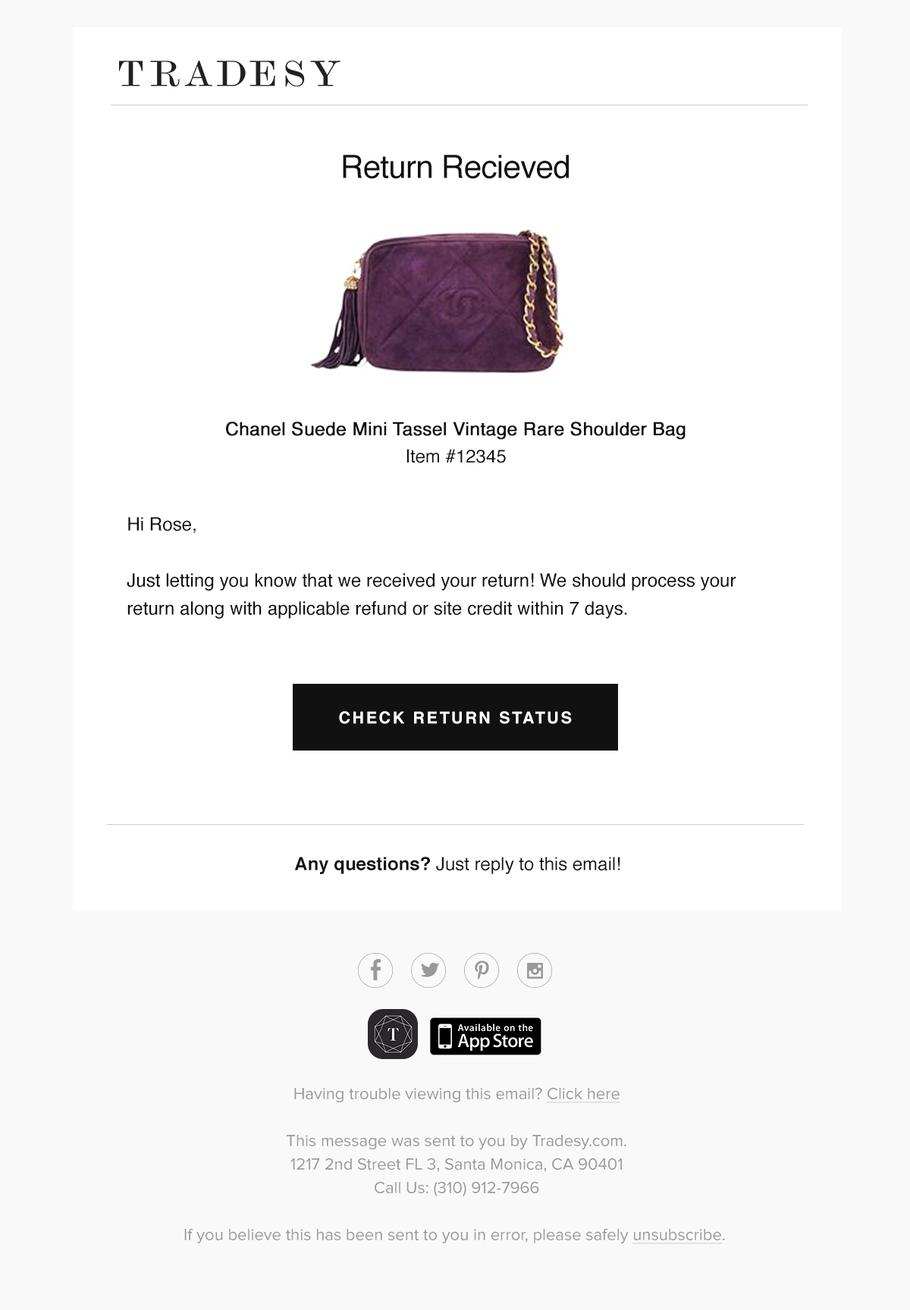
<style>
.page{position:relative;width:910px;height:1310px;background:#ffffff}
.page>*{position:absolute;margin:0}
.t1{font:32.2px "Helvetica";letter-spacing:-0.02em;color:#111111}
.t2{font:18.2px/27.3px "Helvetica";color:#111111;font-weight:bold}
.t3{font:18.2px/27.3px "Helvetica";color:#111111}
.t4{font:18.3px/28.1px "Helvetica";color:#111111}
.t5{font:16.4px "Helvetica-Bold";letter-spacing:0.12em;color:#ffffff}
.t6{font:18.2px "Helvetica";color:#111111}
.t7{font:18.2px "Helvetica-Bold";color:#111111}
.t8{font:16.7px/23.5px "ProximaNova-Regular";color:#999999}
.t9{font:16.7px/23.5px "ProximaNova-Regular";color:#999999;text-decoration:underline}
</style>
<div class="page">
<p class="t1" style="left:343px;top:155px;width:226px;height:24px">Return Recieved</p>
<p class="t2" style="left:226px;top:422px;width:460px;height:41px;text-align:center">Chanel Suede Mini Tassel Vintage Rare Shoulder Bag<br><span class="t3">Item #12345</span></p>
<p class="t4" style="left:127px;top:517px;width:609px;height:102px">Hi Rose, <br><br>Just letting you know that we received your return! We should process your return along with applicable refund or site credit within 7 days.</p>
<p class="t5" style="left:339px;top:711px;width:233px;height:13px">CHECK RETURN STATUS</p>
<p class="t6" style="left:294px;top:857px;width:326px;height:17px"><span class="t7">Any questions?</span> Just reply to this email!</p>
<p class="t8" style="left:184px;top:1087px;width:541px;height:157px;text-align:center">Having trouble viewing this email? <span class="t9">Click here<br></span><br>This message was sent to you by Tradesy.com.<br>1217 2nd Street FL 3, Santa Monica, CA 90401<br>Call Us: (310) 912-7966<br><br>If you believe this has been sent to you in error, please safely <span class="t9">unsubscribe</span>.</p>
</div>
